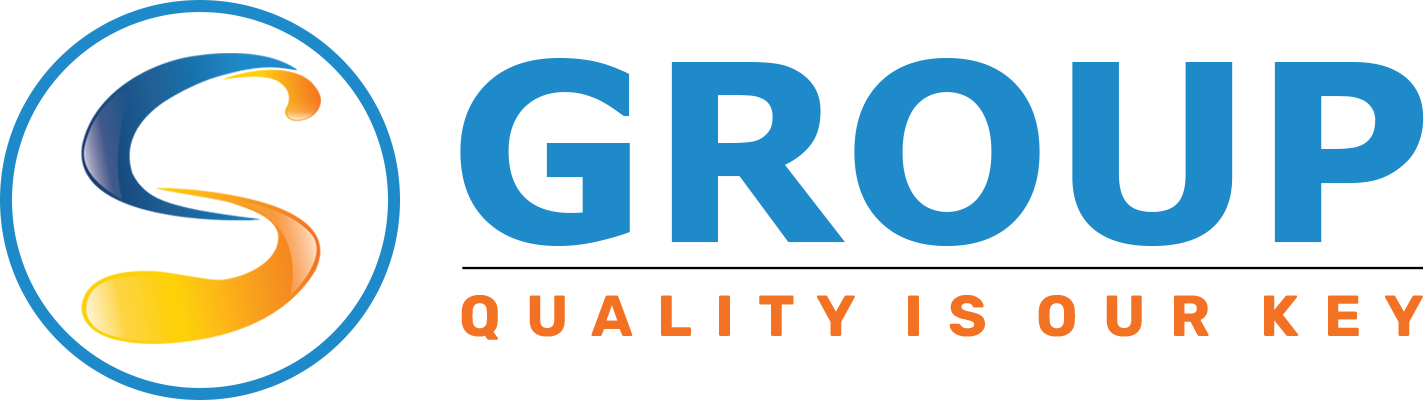
<style>
.page{position:relative;width:1424px;height:400px;background:#ffffff}
.page>*{position:absolute;margin:0}
.t1{font:247.1px "Verdana-Bold";color:#1f8ac9}
.t2{font:57.9px "Rubik-Bold";color:#f37122}
</style>
<div class="page">
<p class="t1" style="left:460px;top:58px;width:964px;height:188px">GROUP</p>
<p class="t2" style="left:461px;top:295px;width:962px;height:45px">Q  U  A  L  I  T  Y    I  S    O  U  R    K  E  Y</p>
</div>
